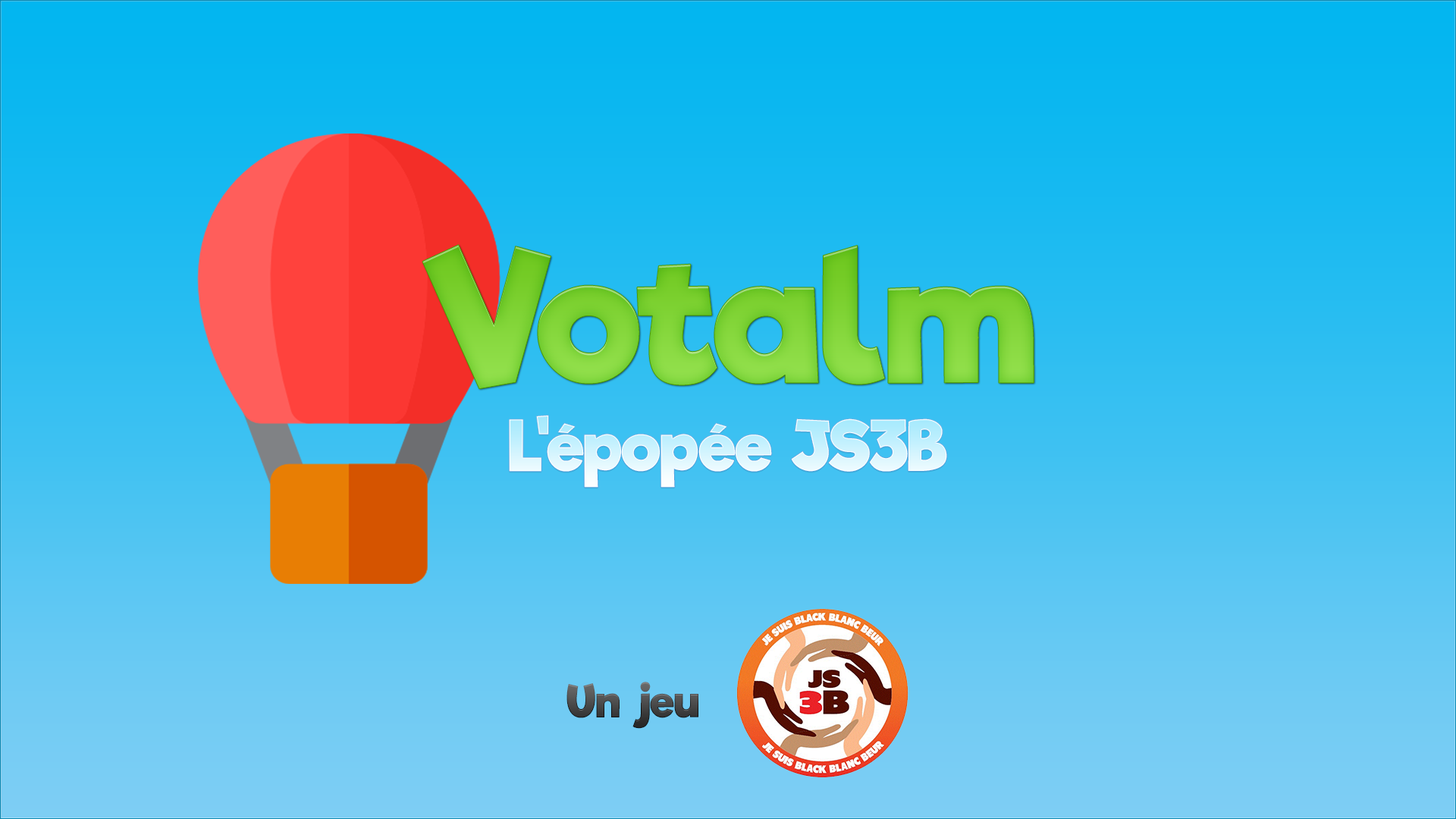
<style>
.page{position:relative;width:1456px;height:819px}
.page>*{position:absolute;margin:0}
.t1{font:179.7px "RifficFree-Bold";color:#7dd236}
.t2{font:67.5px "RifficFree-Bold"}
.t3{font:44px "RifficFree-Bold";color:#474747}
</style>
<div class="page">
<p class="t1" style="left:422px;top:244px;width:612px;height:145px">Votalm</p>
<p class="t2" style="left:509px;top:416px;width:438px;height:72px">L'épopée JS3B</p>
<p class="t3" style="left:566px;top:682px;width:132px;height:47px">Un jeu</p>
</div>
